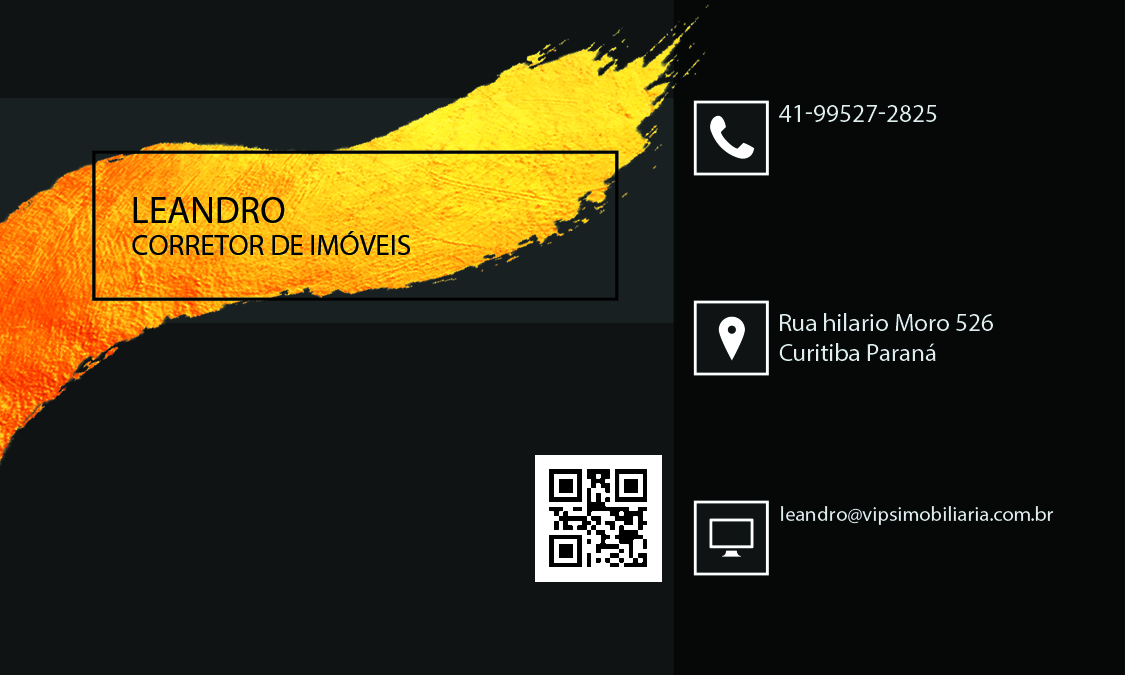
<style>
.page{position:relative;width:1125px;height:675px;background:#060808}
.page>*{position:absolute;margin:0}
.t1{font:25px "MyriadPro-Regular";color:#e1eded;text-transform:uppercase}
.t2{font:37.5px "MyriadPro-Regular";color:#000000;text-transform:uppercase}
.t3{font:29.2px "MyriadPro-Regular";color:#000000;text-transform:uppercase}
.t4{font:25px "MyriadPro-Regular";color:#e1eded}
.t5{font:20.8px "MyriadPro-Regular";color:#e1eded}
</style>
<div class="page">
<p class="t1" style="left:779px;top:105px;width:158px;height:17px">41-99527-2825</p>
<p class="t2" style="left:133px;top:197px;width:152px;height:26px">Leandro</p>
<p class="t3" style="left:132px;top:231px;width:278px;height:24px">Corretor de imóveis</p>
<p class="t4" style="left:779px;top:313px;width:214px;height:48px">Rua hilario Moro 526<br>Curitiba Paraná</p>
<p class="t5" style="left:781px;top:506px;width:273px;height:19px">leandro@vipsimobiliaria.com.br</p>
</div>
